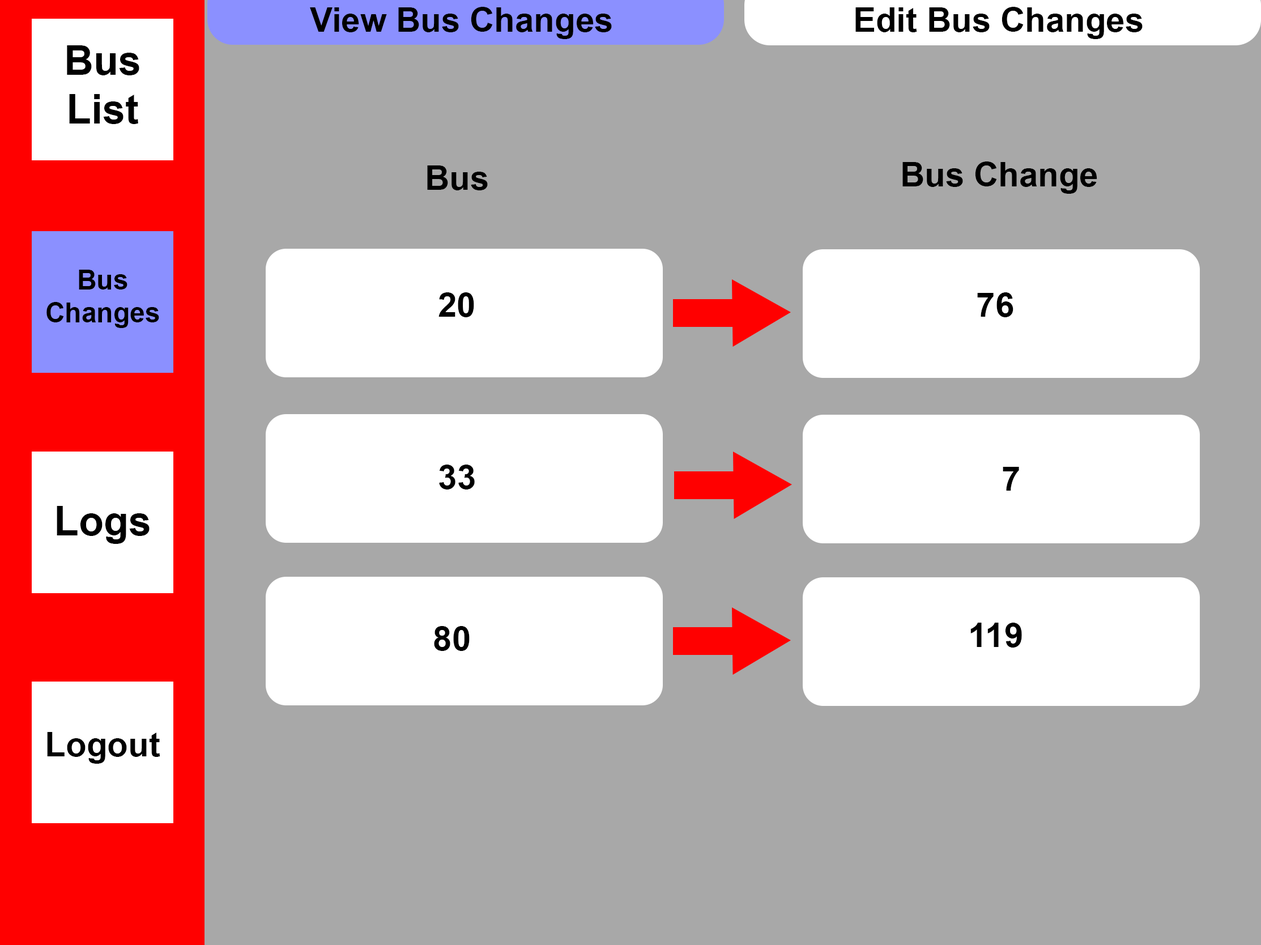
<style>
.page{position:relative;width:1261px;height:945px;background:#a8a8a8}
.page>*{position:absolute;margin:0}
.t1{font:34px "Arial-BoldMT";color:#000000}
.t2{font:40.8px "Arial-BoldMT";color:#000000}
.t3{font:27.2px "Arial-BoldMT";color:#000000}
</style>
<div class="page">
<p class="t1" style="left:310px;top:7px;width:302px;height:32px">View Bus Changes</p>
<p class="t1" style="left:856px;top:7px;width:287px;height:32px">Edit Bus Changes</p>
<p class="t2" style="left:67px;top:45px;width:72px;height:79px;text-align:center">Bus List</p>
<p class="t1" style="left:903px;top:162px;width:195px;height:32px">Bus Change</p>
<p class="t1" style="left:427px;top:165px;width:61px;height:25px">Bus</p>
<p class="t3" style="left:46px;top:270px;width:113px;height:58px;text-align:center">Bus Changes</p>
<p class="t1" style="left:439px;top:292px;width:35px;height:25px">20</p>
<p class="t1" style="left:978px;top:292px;width:36px;height:25px">76</p>
<p class="t1" style="left:439px;top:465px;width:36px;height:25px">33</p>
<p class="t1" style="left:1003px;top:467px;width:17px;height:24px">7</p>
<p class="t2" style="left:57px;top:506px;width:93px;height:38px">Logs</p>
<p class="t1" style="left:434px;top:626px;width:36px;height:25px">80</p>
<p class="t1" style="left:971px;top:623px;width:51px;height:25px">119</p>
<p class="t1" style="left:47px;top:732px;width:113px;height:32px">Logout</p>
</div>
